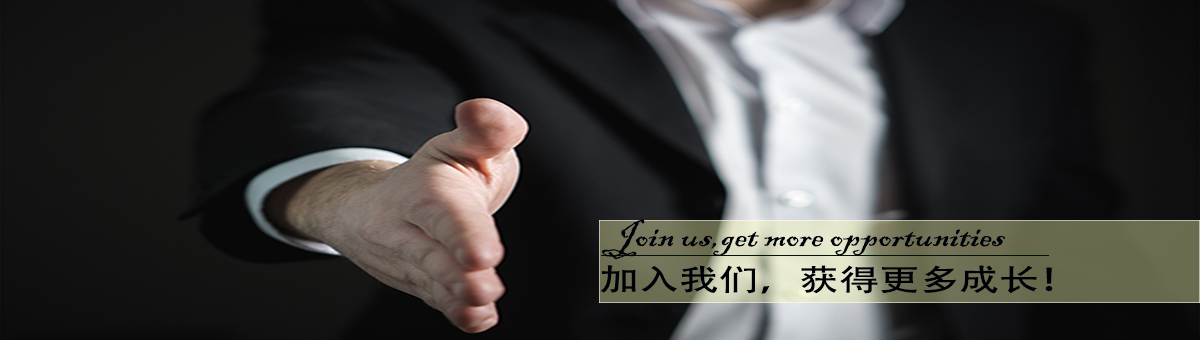
<style>
.page{position:relative;width:1200px;height:340px}
.page>*{position:absolute;margin:0}
.t1{font:34.4px "BlackadderITC-Regular";color:#000107;scale:1.16 1}
.t2{font:30px "AdobeHeitiStd-Regular";color:#000107;scale:1.33 1}
</style>
<div class="page">
<p class="t1" style="left:602px;top:219px;width:404px;height:41px">Join us,get more opportunities</p>
<p class="t2" style="left:600px;top:265px;width:453px;height:29px">加入我们，获得更多成长！</p>
</div>
